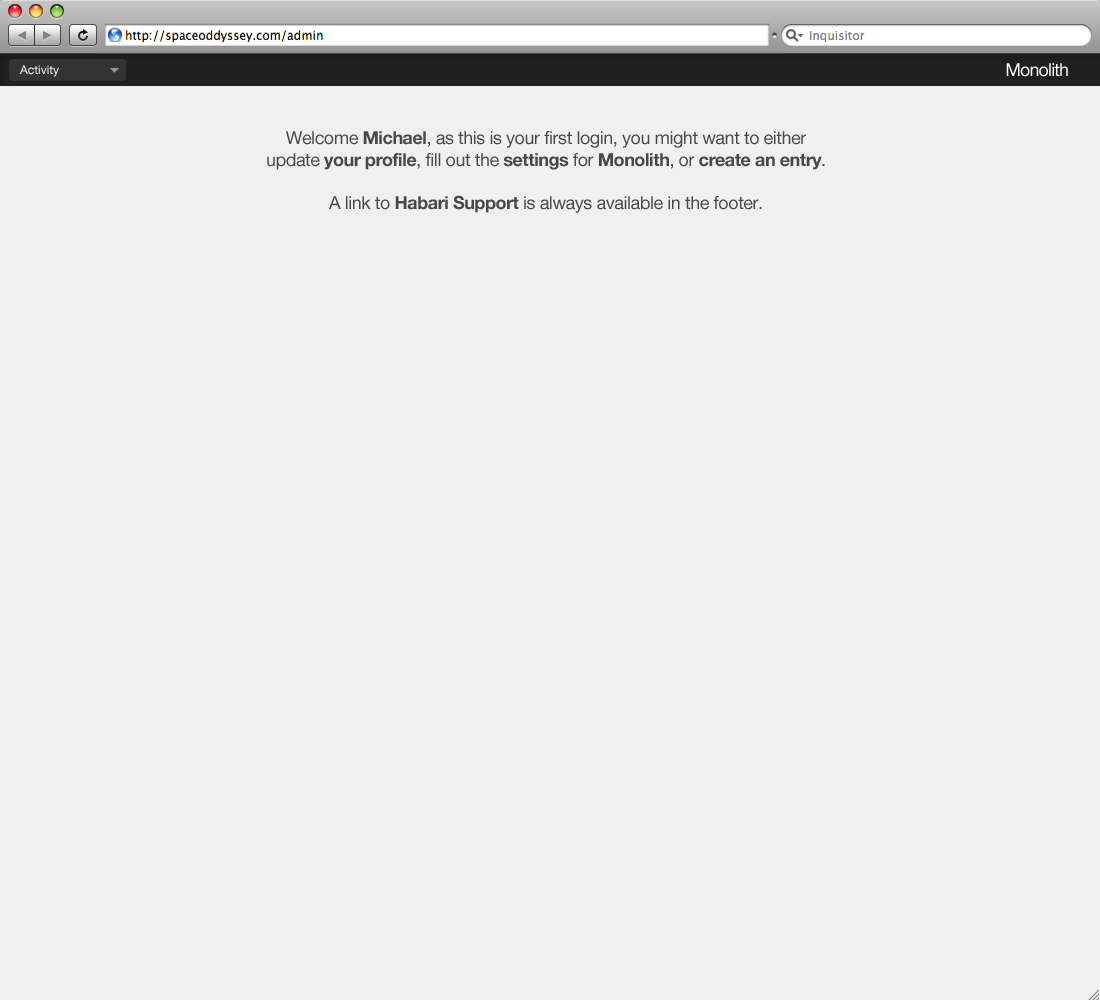
<style>
.page{position:relative;width:1100px;height:1000px;background:#f0f0f0}
.page>*{position:absolute;margin:0}
.t1{font:12px "HelveticaNeue";color:#ffffff}
.t2{font:18px "HelveticaNeue";letter-spacing:-0.05em;color:#ffffff}
.t3{font:18px "HelveticaNeue";letter-spacing:-0.025em;color:#484848}
.t4{font:18px "HelveticaNeue-Bold";letter-spacing:-0.025em;color:#484848}
</style>
<div class="page">
<p class="t1" style="left:20px;top:65px;width:39px;height:12px">Activity</p>
<p class="t2" style="left:1006px;top:63px;width:62px;height:14px">Monolith</p>
<p class="t3" style="left:267px;top:131px;width:558px;height:82px;text-align:center">Welcome <span class="t4">Michael</span>, as this is your first login, you might want to either<br>update <span class="t4">your profile</span>, fill out the <span class="t4">settings</span> for <span class="t4">Monolith</span>, or <span class="t4">create an entry</span>.<br><br>A link to <span class="t4">Habari Support</span> is always available in the footer.</p>
</div>
